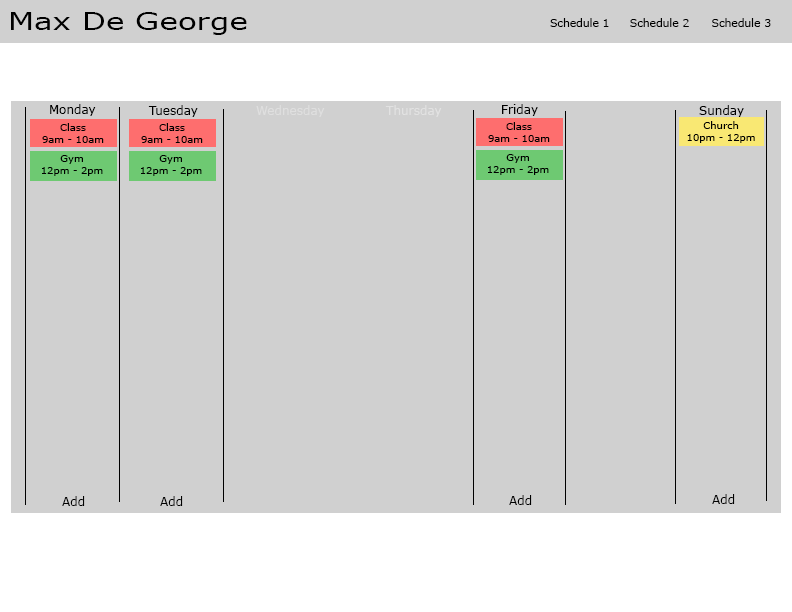
<style>
.page{position:relative;width:792px;height:612px;background:#d0d0d0}
.page>*{position:absolute;margin:0}
.t1{font:24px "Verdana";color:#000000;scale:1.29 1}
.t2{font:11px "Verdana";color:#000000}
.t3{font:12px "Verdana";color:#000000}
.t4{font:12px "Verdana";color:#dfdfdf}
.t5{font:12px "Verdana";color:#e2e2e2}
.t6{font:10px "Verdana";color:#000000}
.t7{font:12px "Verdana";color:#010101}
</style>
<div class="page">
<p class="t1" style="left:11px;top:12px;width:236px;height:23px">Max De George</p>
<p class="t2" style="left:550px;top:18px;width:59px;height:9px">Schedule 1</p>
<p class="t2" style="left:630px;top:18px;width:59px;height:9px">Schedule 2</p>
<p class="t2" style="left:712px;top:18px;width:59px;height:9px">Schedule 3</p>
<p class="t3" style="left:50px;top:104px;width:46px;height:12px">Monday</p>
<p class="t3" style="left:148px;top:105px;width:50px;height:12px">Tuesday</p>
<p class="t4" style="left:256px;top:105px;width:69px;height:12px">Wednesday</p>
<p class="t5" style="left:385px;top:105px;width:57px;height:12px">Thursday</p>
<p class="t3" style="left:502px;top:104px;width:36px;height:12px">Friday</p>
<p class="t3" style="left:699px;top:105px;width:45px;height:12px">Sunday</p>
<p class="t6" style="left:42px;top:123px;width:62px;height:20px;text-align:center">Class<br>9am - 10am</p>
<p class="t6" style="left:141px;top:123px;width:62px;height:20px;text-align:center">Class<br>9am - 10am</p>
<p class="t6" style="left:488px;top:122px;width:62px;height:20px;text-align:center">Class<br>9am - 10am</p>
<p class="t6" style="left:687px;top:121px;width:68px;height:22px;text-align:center">Church<br>10pm - 12pm</p>
<p class="t6" style="left:42px;top:155px;width:61px;height:21px;text-align:center">Gym<br>12pm - 2pm</p>
<p class="t6" style="left:141px;top:155px;width:61px;height:21px;text-align:center">Gym<br>12pm - 2pm</p>
<p class="t6" style="left:488px;top:154px;width:61px;height:21px;text-align:center">Gym<br>12pm - 2pm</p>
<p class="t7" style="left:62px;top:496px;width:23px;height:10px">Add</p>
<p class="t7" style="left:160px;top:496px;width:23px;height:10px">Add</p>
<p class="t7" style="left:509px;top:495px;width:23px;height:10px">Add</p>
<p class="t7" style="left:712px;top:494px;width:23px;height:10px">Add</p>
</div>
